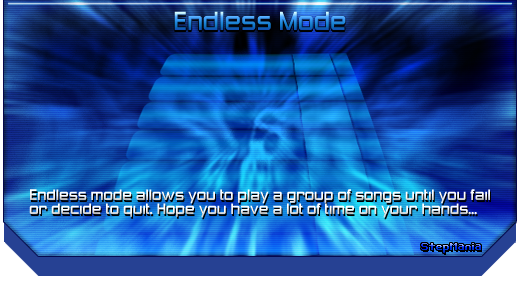
<style>
.page{position:relative;width:520px;height:288px}
.page>*{position:absolute;margin:0}
.t1{font:24px "ZeroThrees"}
.t2{font:14px "ZeroThrees";color:#ffffff}
.t3{font:10px "Bit-Darling10-(sRB)"}
</style>
<div class="page">
<p class="t1" style="left:174px;top:11px;width:172px;height:19px">Endless Mode</p>
<p class="t2" style="left:29px;top:189px;width:461px;height:29px">Endless mode allows you to play a group of songs until you fail<br>or decide to quit. Hope you have a lot of time on your hands...</p>
<p class="t3" style="left:421px;top:243px;width:60px;height:10px">StepMania</p>
</div>
